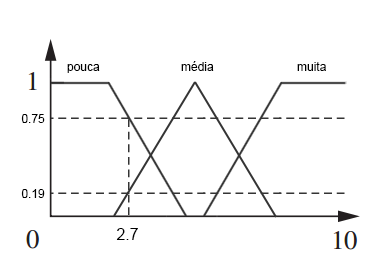
<style>
.page{position:relative;width:386px;height:270px;background:#ffffff}
.page>*{position:absolute;margin:0}
.t1{font:12px "ArialMT";color:#000000}
.t2{font:16px "ArialMT";color:#000000}
</style>
<div class="page">
<p class="t1" style="left:67px;top:64px;width:33px;height:9px">pouca</p>
<p class="t1" style="left:181px;top:61px;width:33px;height:10px">média</p>
<p class="t1" style="left:297px;top:62px;width:29px;height:9px">muita</p>
<p class="t1" style="left:21px;top:114px;width:24px;height:9px">0.75</p>
<p class="t1" style="left:21px;top:189px;width:24px;height:9px">0.19</p>
<p class="t2" style="left:116px;top:228px;width:22px;height:12px">2.7</p>
</div>
